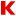
<style>
.page{position:relative;width:16px;height:16px;background:#fefefe}
.page>*{position:absolute;margin:0}
.t1{font:15.2px "MFLiHei_Noncommercial-Regular";color:#e70000;scale:1.31 1}
</style>
<div class="page">
<p class="t1" style="left:1px;top:1px;width:15px;height:14px">K</p>
</div>
